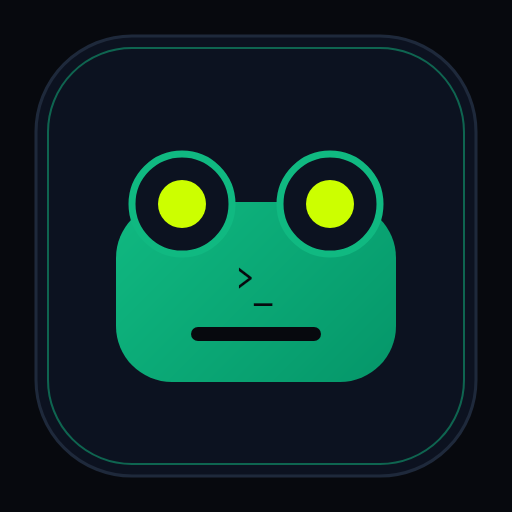
<style>
.page{position:relative;width:512px;height:512px;background:#0c1220}
.page>*{position:absolute;margin:0}
.t1{font:52px "sans-serif-Regular";font-weight:bold}
</style>
<div class="page">
<p class="t1" style="left:236px;top:254px;width:40px;height:65px">&gt;_</p>
</div>
